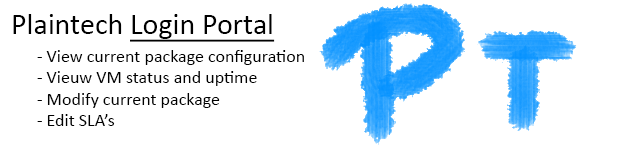
<style>
.page{position:relative;width:640px;height:150px;background:#ffffff}
.page>*{position:absolute;margin:0}
.t1{font:30px "Calibri";color:#000000;text-decoration:underline}
.t2{font:30px "Calibri";color:#000000}
.t3{font:18px "Calibri";color:#000000}
</style>
<div class="page">
<p class="t1" style="left:13px;top:14px;width:262px;height:28px"><span class="t2">Plaintech </span>Login Portal</p>
<p class="t3" style="left:37px;top:50px;width:267px;height:76px">- View current package configuration<br> - Vieuw VM status and uptime<br> - Modify current package<br> - Edit SLA’s</p>
</div>
